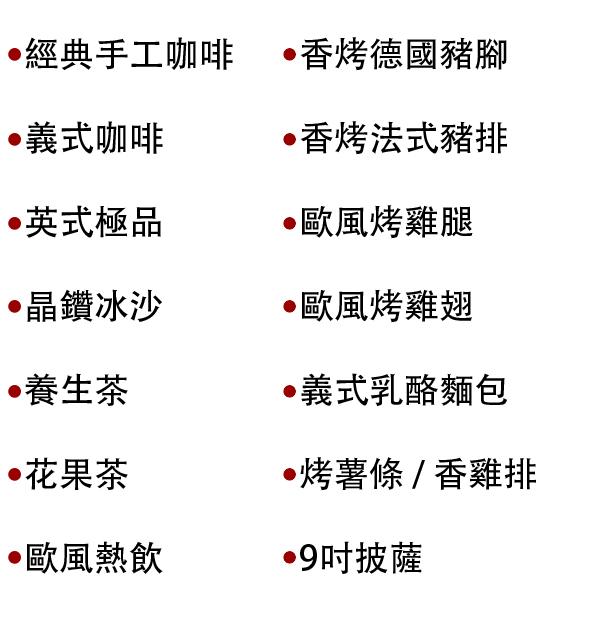
<style>
.page{position:relative;width:600px;height:620px;background:#ffffff}
.page>*{position:absolute;margin:0}
.t1{font:35px "AdobeHeitiStd-Regular";color:#000000}
</style>
<div class="page">
<p class="t1" style="left:25px;top:37px;width:208px;height:537px">經典手工咖啡<br><br>義式咖啡<br><br>英式極品<br><br>晶鑽冰沙<br><br>養生茶<br><br>花果茶<br><br>歐風熱飲</p>
<p class="t1" style="left:300px;top:37px;width:236px;height:537px">香烤德國豬腳<br><br>香烤法式豬排<br><br>歐風烤雞腿<br><br>歐風烤雞翅<br><br>義式乳酪麵包<br><br>烤薯條 / 香雞排<br><br>9吋披薩</p>
</div>
